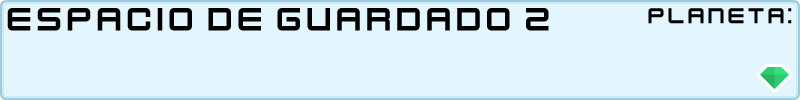
<style>
.page{position:relative;width:800px;height:100px;background:#e3f6fd}
.page>*{position:absolute;margin:0}
.t1{font:36px "KenVector-Future";color:#000000}
.t2{font:24px "KenVector-Future";color:#000000}
</style>
<div class="page">
<p class="t1" style="left:7px;top:8px;width:542px;height:23px">espacio de guardado 2</p>
<p class="t2" style="left:648px;top:8px;width:144px;height:16px">planeta:</p>
</div>
